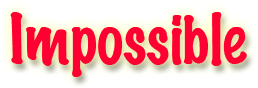
<style>
.page{position:relative;width:258px;height:88px;background:#ffffff}
.page>*{position:absolute;margin:0}
.t1{font:63px "MarkerFelt-Thin";color:#ff0033}
</style>
<div class="page">
<p class="t1" style="left:10px;top:12px;width:237px;height:65px">Impossible</p>
<p class="t1" style="left:10px;top:12px;width:237px;height:65px">Impossible</p>
</div>
